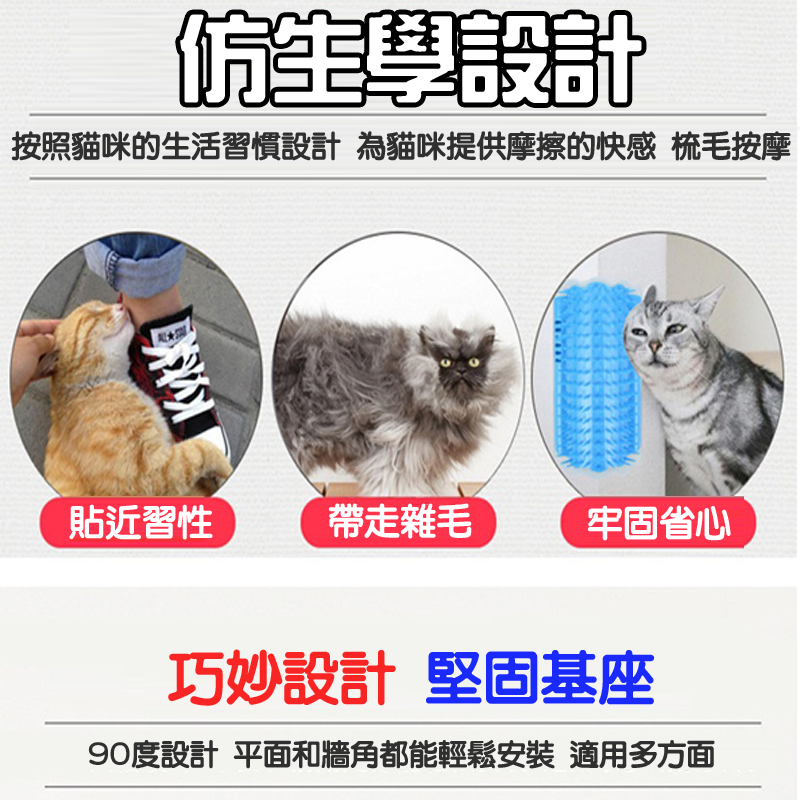
<style>
.page{position:relative;width:800px;height:800px}
.page>*{position:absolute;margin:0}
.t1{font:93.5px "HanWangZonYi";color:#ffffff}
.t2{font:30px "HanWangYenHeavy";color:#2f2f2f}
.t3{font:36px "HanWangYenHeavy";color:#ffffff}
.t4{font:57.4px "HanWangYenHeavy";color:#f92525}
.t5{font:57.4px "HanWangYenHeavy";color:#1a2afc}
.t6{font:29.2px "HanWangYenHeavy";color:#2f2f2f}
</style>
<div class="page">
<p class="t1" style="left:180px;top:14px;width:462px;height:89px">仿生學設計</p>
<p class="t2" style="left:11px;top:131px;width:780px;height:30px">按照貓咪的生活習慣設計 為貓咪提供摩擦的快感 梳毛按摩</p>
<p class="t3" style="left:69px;top:504px;width:144px;height:36px">貼近習性</p>
<p class="t3" style="left:328px;top:503px;width:144px;height:36px">帶走雜毛</p>
<p class="t3" style="left:587px;top:505px;width:144px;height:36px">牢固省心</p>
<p class="t4" style="left:168px;top:649px;width:487px;height:57px">巧妙設計 <span class="t5">堅固基座</span></p>
<p class="t6" style="left:88px;top:740px;width:627px;height:29px">90度設計 平面和牆角都能輕鬆安裝 適用多方面</p>
</div>
